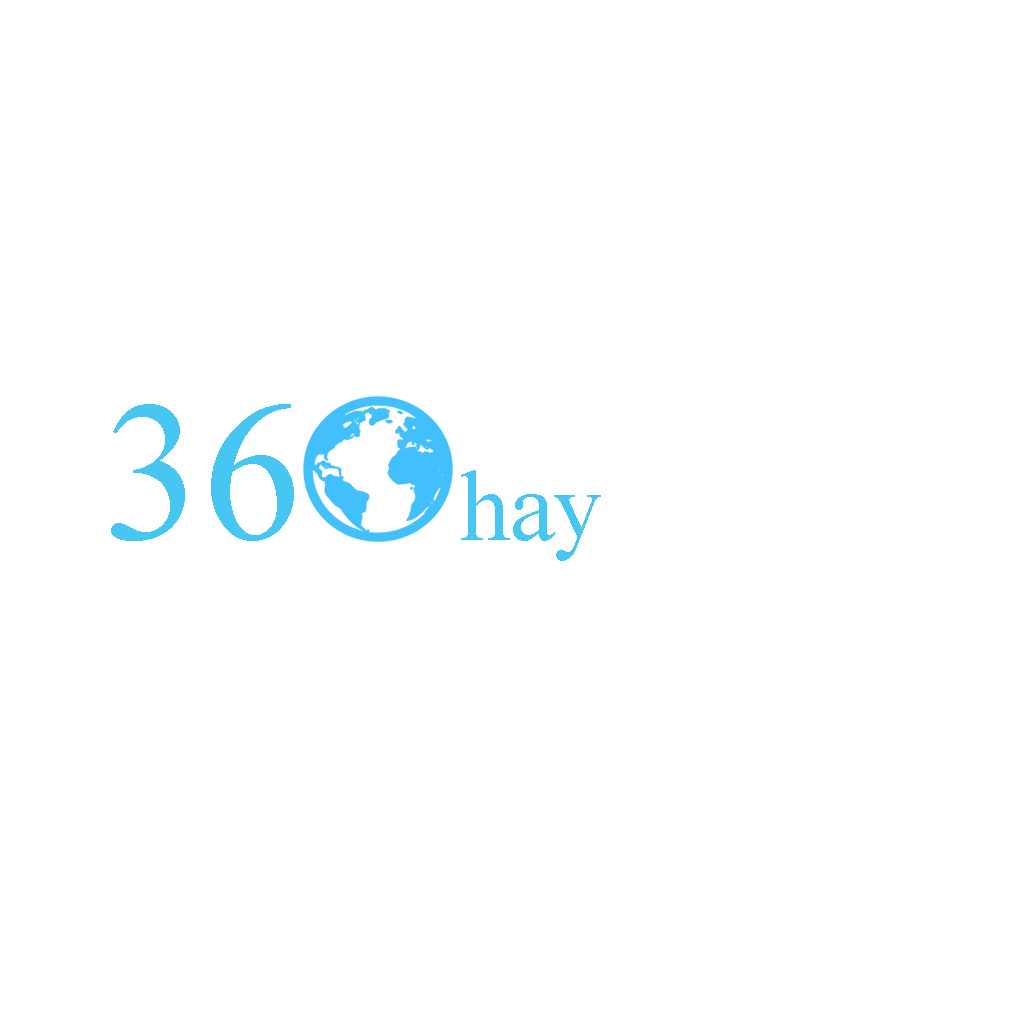
<style>
.page{position:relative;width:1024px;height:1024px;background:#ffffff}
.page>*{position:absolute;margin:0}
.t1{font:200px "TimesNewRomanPSMT";color:#46c6f0}
.t2{font:100px "TimesNewRomanPSMT";color:#46c6f0}
</style>
<div class="page">
<p class="t1" style="left:111px;top:404px;width:183px;height:137px">36</p>
<p class="t2" style="left:461px;top:470px;width:140px;height:91px">hay</p>
</div>
